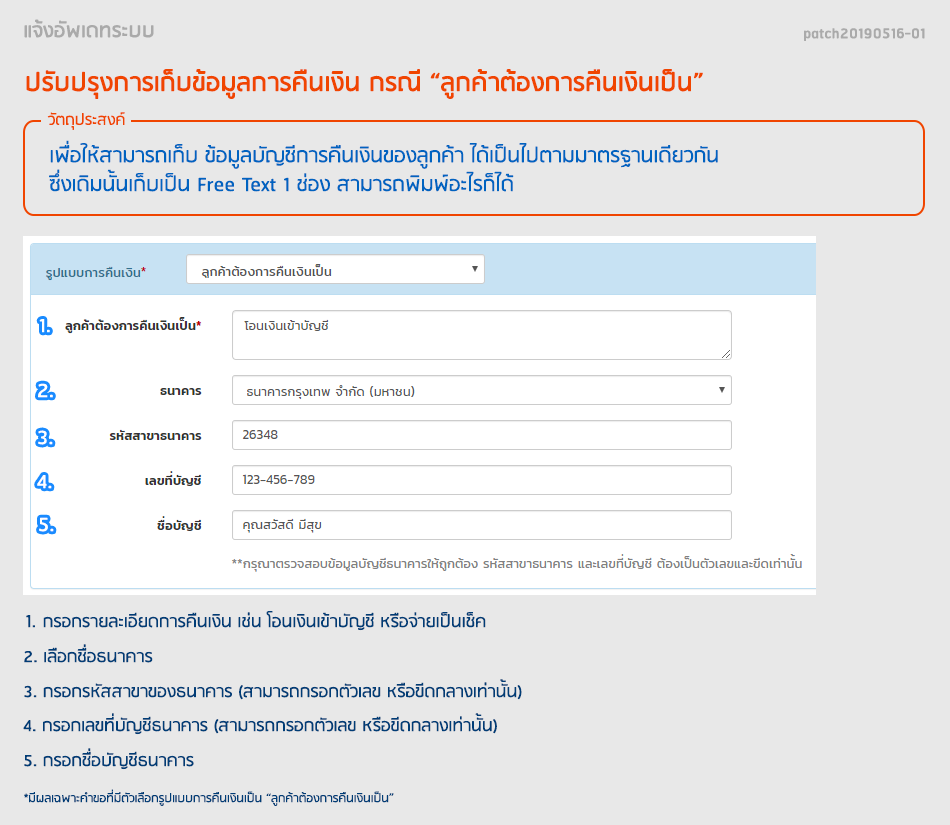
<style>
.page{position:relative;width:950px;height:825px;background:#e8e8e8}
.page>*{position:absolute;margin:0}
.t1{font:24px "RSU-Bold";color:#aaaaaa}
.t2{font:18px "RSU-Bold";color:#aaaaaa}
.t3{font:30px "RSU-Bold";color:#f04500}
.t4{font:18px "RSU";color:#f04500}
.t5{font:24px "RSU";color:#0063c0}
.t6{font:24px "RSU";color:#ffffff}
.t7{font:20px "RSU";color:#003d76}
.t8{font:22px "RSU";color:#003d76}
.t9{font:14px "RSU";color:#003d76}
</style>
<div class="page">
<p class="t1" style="left:24px;top:19px;width:130px;height:19px">แจ้งอัพเดทระบบ</p>
<p class="t2" style="left:804px;top:28px;width:121px;height:13px">patch20190516-01</p>
<p class="t3" style="left:26px;top:69px;width:677px;height:30px">ปรับปรุงการเก็บข้อมูลการคืนเงิน กรณี “ลูกค้าต้องการคืนเงินเป็น”</p>
<p class="t4" style="left:47px;top:112px;width:78px;height:18px">วัตถุประสงค์</p>
<p class="t5" style="left:49px;top:140px;width:669px;height:52px">เพื่อให้สามารถเก็บ ข้อมูลบัญชีการคืนเงินของลูกค้า ได้เป็นไปตามมาตรฐานเดียวกัน<br>ซึ่งเดิมนั้นเก็บเป็น Free Text 1 ช่อง สามารถพิมพ์อะไรก็ได้</p>
<p class="t6" style="left:38px;top:383px;width:15px;height:15px">2.</p>
<p class="t6" style="left:38px;top:430px;width:15px;height:15px">3.</p>
<p class="t6" style="left:37px;top:475px;width:15px;height:14px">4.</p>
<p class="t6" style="left:39px;top:517px;width:15px;height:15px">5.</p>
<p class="t7" style="left:26px;top:611px;width:460px;height:20px"><span class="t8">1</span>.    กรอกรายละเอียดการคืนเงิน เช่น โอนเงินเข้าบัญชี หรือจ่ายเป็นเช็ค</p>
<p class="t7" style="left:24px;top:644px;width:129px;height:19px">2. เลือกชื่อธนาคาร</p>
<p class="t7" style="left:24px;top:679px;width:498px;height:21px">3. กรอกรหัสสาขาของธนาคาร (สามารถกรอกตัวเลข หรือขีดกลางเท่านั้น)</p>
<p class="t7" style="left:23px;top:713px;width:474px;height:22px">4. กรอกเลขที่บัญชีธนาคาร (สามารถกรอกตัวเลข หรือขีดกลางเท่านั้น)</p>
<p class="t7" style="left:24px;top:748px;width:170px;height:22px">5. กรอกชื่อบัญชีธนาคาร</p>
<p class="t9" style="left:24px;top:789px;width:370px;height:17px">*มีผลเฉพาะคำขอที่มีตัวเลือกรูปแบบการคืนเงินเป็น “ลูกค้าต้องการคืนเงินเป็น”</p>
</div>
